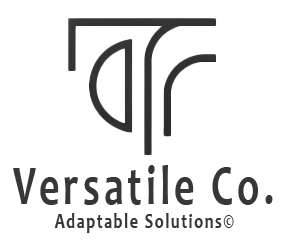
<style>
.page{position:relative;width:287px;height:247px;background:#ffffff}
.page>*{position:absolute;margin:0}
.t1{font:56px "Candara-Bold";letter-spacing:0.1em;color:#373738;scale:0.71 1}
.t2{font:22.4px "Candara-Bold";letter-spacing:0.1em;color:#373738;scale:0.71 1}
</style>
<div class="page">
<p class="t1" style="left:13px;top:165px;width:260px;height:40px">Versatile Co.</p>
<p class="t2" style="left:54px;top:213px;width:180px;height:20px">Adaptable Solutions©</p>
</div>
